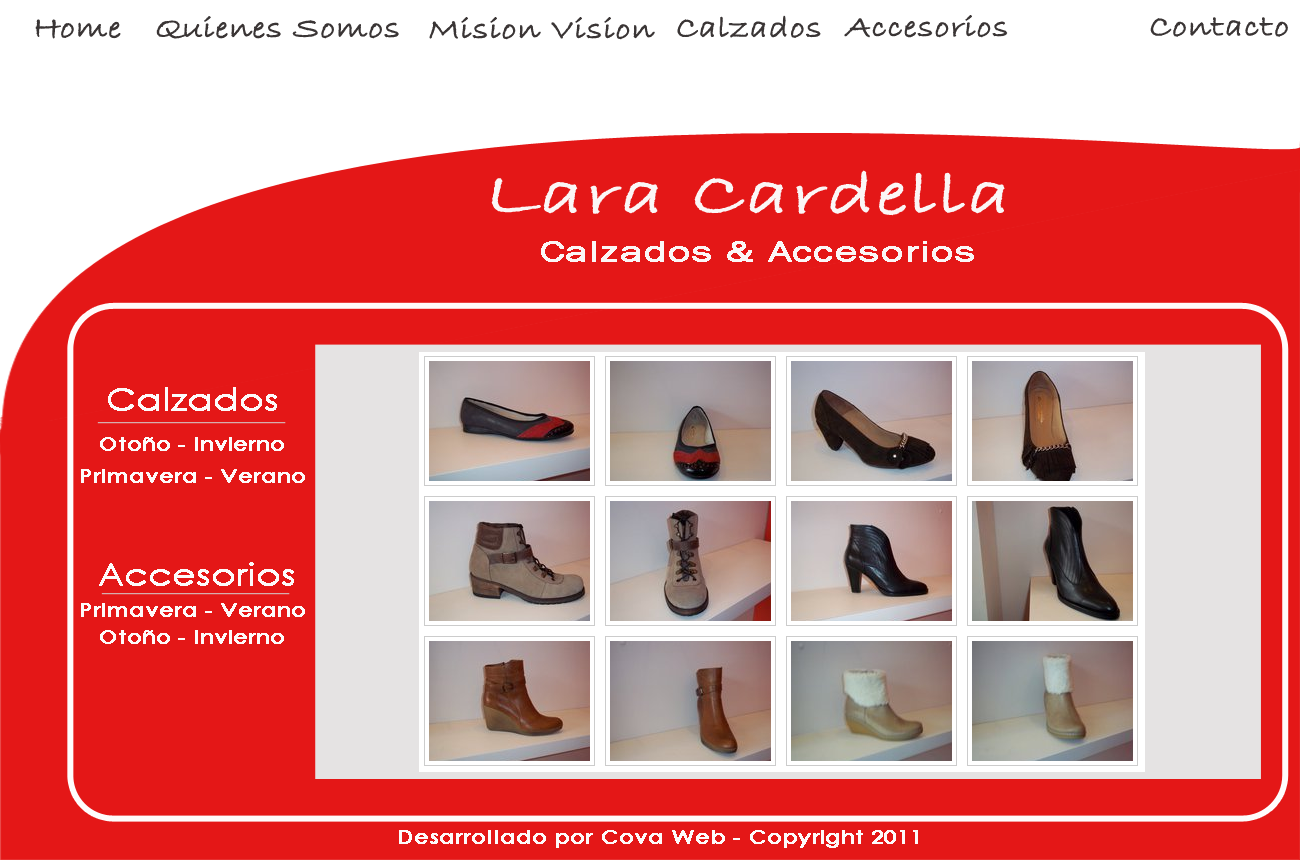
<style>
.page{position:relative;width:1300px;height:860px;background:#e41717}
.page>*{position:absolute;margin:0}
.t1{font:30px "BradleyHandITC";color:#3a3535;font-weight:bold;scale:1.2 1}
.t2{font:60px "BradleyHandITC";color:#fbf6f6;font-weight:bold;scale:1.44 1}
.t3{font:30px "FranklinGothic-Book";color:#fbf6f6;font-weight:bold;scale:1.44 1}
.t4{font:30px "CenturyGothic";color:#fdfafa;font-weight:bold;scale:1.2 1}
.t5{font:18px "CenturyGothic";color:#fdfafa;font-weight:bold;scale:1.2 1}
</style>
<div class="page">
<p class="t1" style="left:156px;top:16px;width:243px;height:23px">Quienes Somos</p>
<p class="t1" style="left:429px;top:17px;width:226px;height:23px">Mision Vision</p>
<p class="t1" style="left:677px;top:15px;width:144px;height:23px">Calzados</p>
<p class="t1" style="left:844px;top:15px;width:164px;height:23px">Accesorios</p>
<p class="t1" style="left:1150px;top:17px;width:138px;height:20px">Contacto</p>
<p class="t1" style="left:35px;top:19px;width:86px;height:20px">Home</p>
<p class="t2" style="left:491px;top:170px;width:514px;height:46px">Lara Cardella</p>
<p class="t3" style="left:541px;top:241px;width:433px;height:21px">Calzados &amp; Accesorios</p>
<p class="t4" style="left:108px;top:387px;width:169px;height:24px">Calzados</p>
<p class="t5" style="left:100px;top:437px;width:184px;height:14px">Otoño - Invierno</p>
<p class="t5" style="left:81px;top:469px;width:224px;height:14px">Primavera - Verano</p>
<p class="t4" style="left:99px;top:562px;width:195px;height:24px">Accesorios</p>
<p class="t5" style="left:81px;top:603px;width:224px;height:14px">Primavera - Verano</p>
<p class="t5" style="left:100px;top:630px;width:184px;height:14px">Otoño - Invierno</p>
<p class="t5" style="left:399px;top:830px;width:519px;height:18px">Desarrollado por Cova Web - Copyright 2011</p>
</div>
